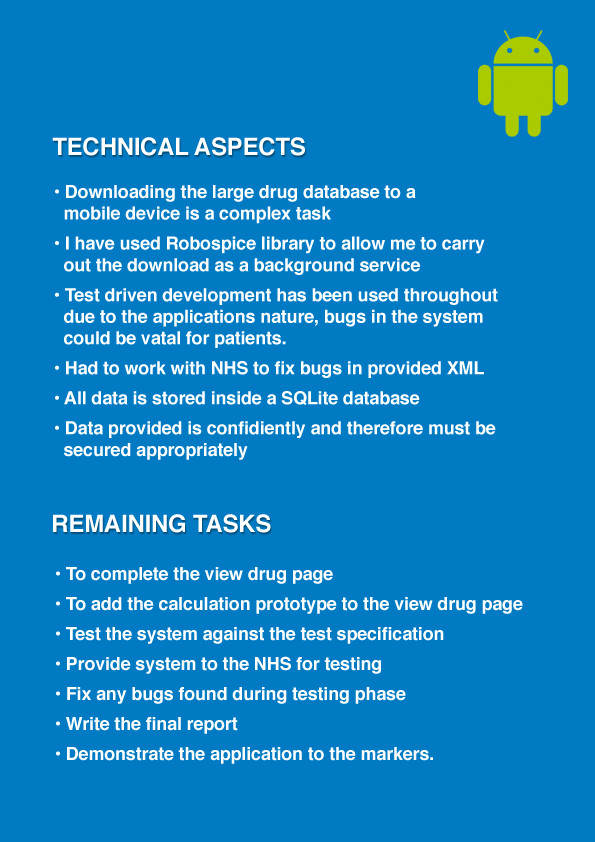
<style>
.page{position:relative;width:595px;height:842px;background:#007bc3}
.page>*{position:absolute;margin:0}
.t1{font:24px "Helvetica-Bold";letter-spacing:-0.01em;color:#ffffff}
.t2{font:18px/30px "Helvetica-Bold";letter-spacing:-0.01em;color:#ffffff}
.t3{font:18px "Helvetica-Bold";letter-spacing:-0.01em;color:#ffffff}
</style>
<div class="page">
<p class="t1" style="left:52px;top:137px;width:253px;height:19px">TECHNICAL ASPECTS</p>
<p class="t2" style="left:55px;top:185px;width:443px;height:275px"><span class="t3">• Downloading the large drug database to a <br>  mobile device is a complex task<br></span>• I have used Robospice library to allow me to carry<br><span class="t3">  out the download as a background service<br></span>• Test driven development has been used throughout<br><span class="t3">  due to the applications nature, bugs in the system<br>  could be vatal for patients.<br></span>• Had to work with NHS to fix bugs in provided XML<br>• All data is stored inside a SQLite database<br>• Data provided is confidiently and therefore must be<br><span class="t3">  secured appropriately</span></p>
<p class="t1" style="left:53px;top:514px;width:218px;height:19px">REMAINING TASKS</p>
<p class="t2" style="left:56px;top:567px;width:467px;height:197px"><span class="t3">• To complete the view drug page<br></span>• To add the calculation prototype to the view drug page<br>• Test the system against the test specification<br>• Provide system to the NHS for testing<br>• Fix any bugs found during testing phase<br>• Write the final report<br>• Demonstrate the application to the markers.</p>
</div>
